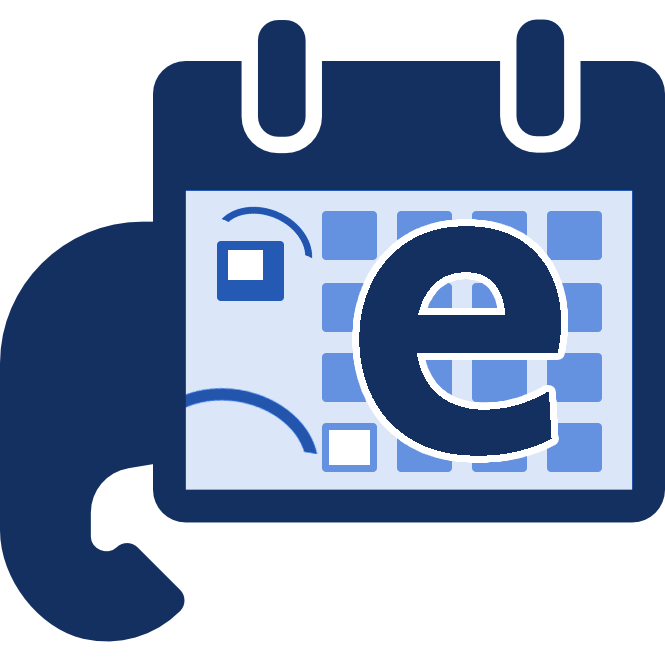
<style>
.page{position:relative;width:665px;height:672px;background:#143061}
.page>*{position:absolute;margin:0}
.t1{font:440.9px "Cabin-Bold";letter-spacing:-0.08em;color:#143061}
</style>
<div class="page">
<p class="t1" style="left:359px;top:226px;width:202px;height:230px">e</p>
</div>
